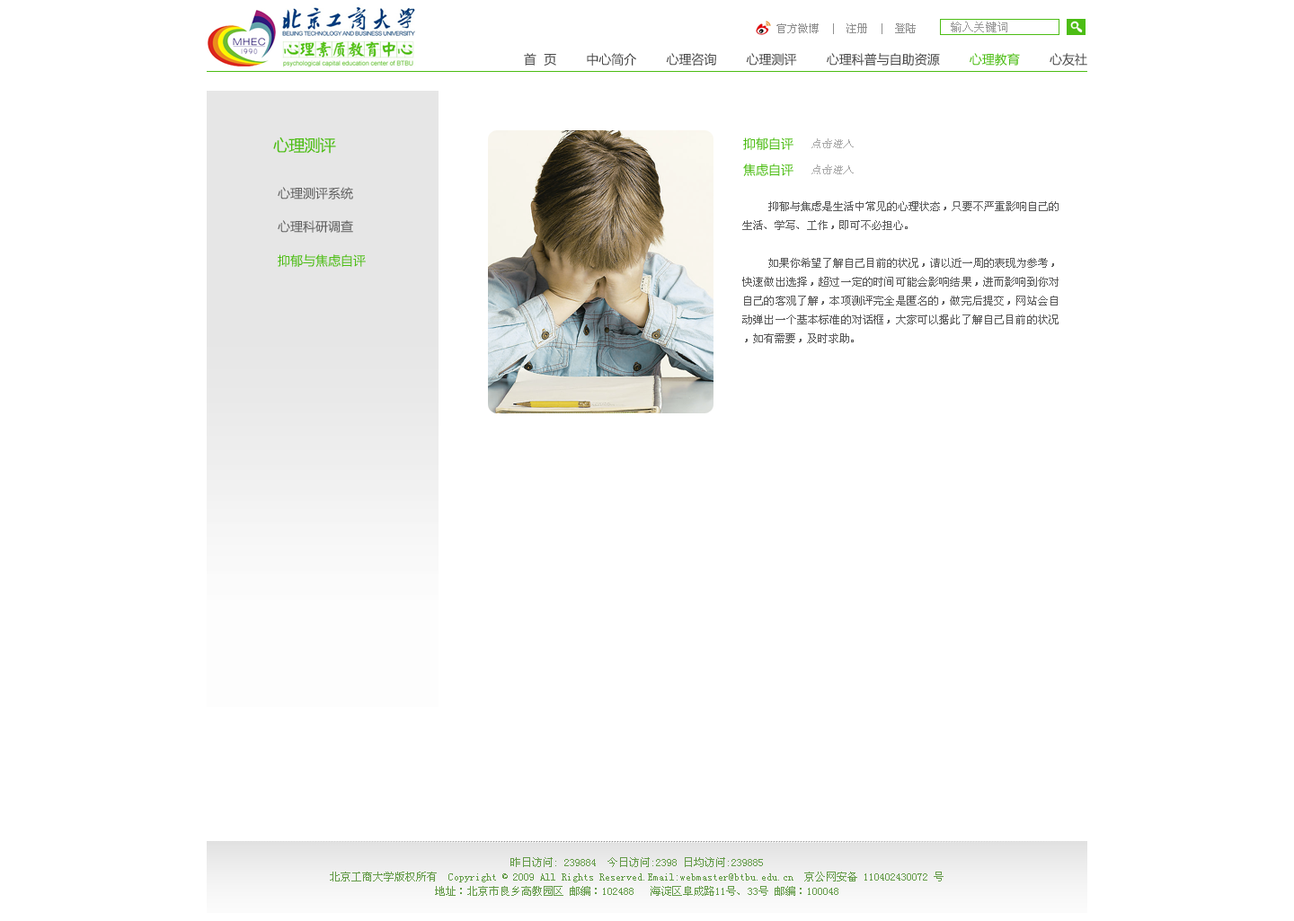
<style>
.page{position:relative;width:1294px;height:921px;background:#ffffff}
.page>*{position:absolute;margin:0}
.t1{font:10.8px "SimSun";color:#8f8f8f}
.t2{font:12.6px "MicrosoftYaHei";color:#474747}
.t3{font:12.6px "MicrosoftYaHei";color:#4cbd14}
.t4{font:16.2px "MicrosoftYaHei";letter-spacing:-0.04em;color:#4cbd14;text-transform:uppercase}
.t5{font:10.8px "SimSun";color:#a9a9a9;font-style:italic}
.t6{font:12.6px "MicrosoftYaHei";color:#5f5f5f}
.t7{font:10.8px "SimSun";color:#5c5c5c}
.t8{font:10.8px/14.4px "SimSun";color:#649b48}
</style>
<div class="page">
<p class="t1" style="left:777px;top:23px;width:139px;height:11px">官方微博  |  注册  |  登陆</p>
<p class="t2" style="left:524px;top:53px;width:564px;height:13px">首  页        中心简介        心理咨询        心理测评        心理科普与自助资源        <span class="t3">心理教育        </span>心友社</p>
<p class="t4" style="left:273px;top:137px;width:63px;height:17px">心理测评</p>
<p class="t3" style="left:743px;top:138px;width:51px;height:12px">抑郁自评</p>
<p class="t5" style="left:812px;top:138px;width:42px;height:10px">点击进入</p>
<p class="t3" style="left:743px;top:164px;width:51px;height:12px">焦虑自评</p>
<p class="t5" style="left:812px;top:164px;width:42px;height:10px">点击进入</p>
<p class="t6" style="left:278px;top:187px;width:75px;height:13px">心理测评系统</p>
<p class="t7" style="left:742px;top:201px;width:317px;height:142px;text-align:justify">抑郁与焦虑是生活中常见的心理状态，只要不严重影响自己的生活、学写、工作，即可不必担心。<br><br>    如果你希望了解自己目前的状况，请以近一周的表现为参考，快速做出选择，超过一定的时间可能会影响结果，进而影响到你对自己的客观了解，本项测评完全是匿名的，做完后提交，网站会自动弹出一个基本标准的对话框，大家可以据此了解自己目前的状况，如有需要，及时求助。</p>
<p class="t6" style="left:278px;top:220px;width:75px;height:13px">心理科研调查</p>
<p class="t3" style="left:278px;top:254px;width:88px;height:13px">抑郁与焦虑自评</p>
<p class="t8" style="left:330px;top:857px;width:614px;height:39px;text-align:center">昨日访问: 239884  今日访问:2398 日均访问:239885<br>北京工商大学版权所有  Copyright © 2009 All Rights Reserved.Email:webmaster@btbu.edu.cn  京公网安备 110402430072 号<br>地址：北京市良乡高教园区 邮编：102488   海淀区阜成路11号、33号 邮编：100048</p>
</div>
